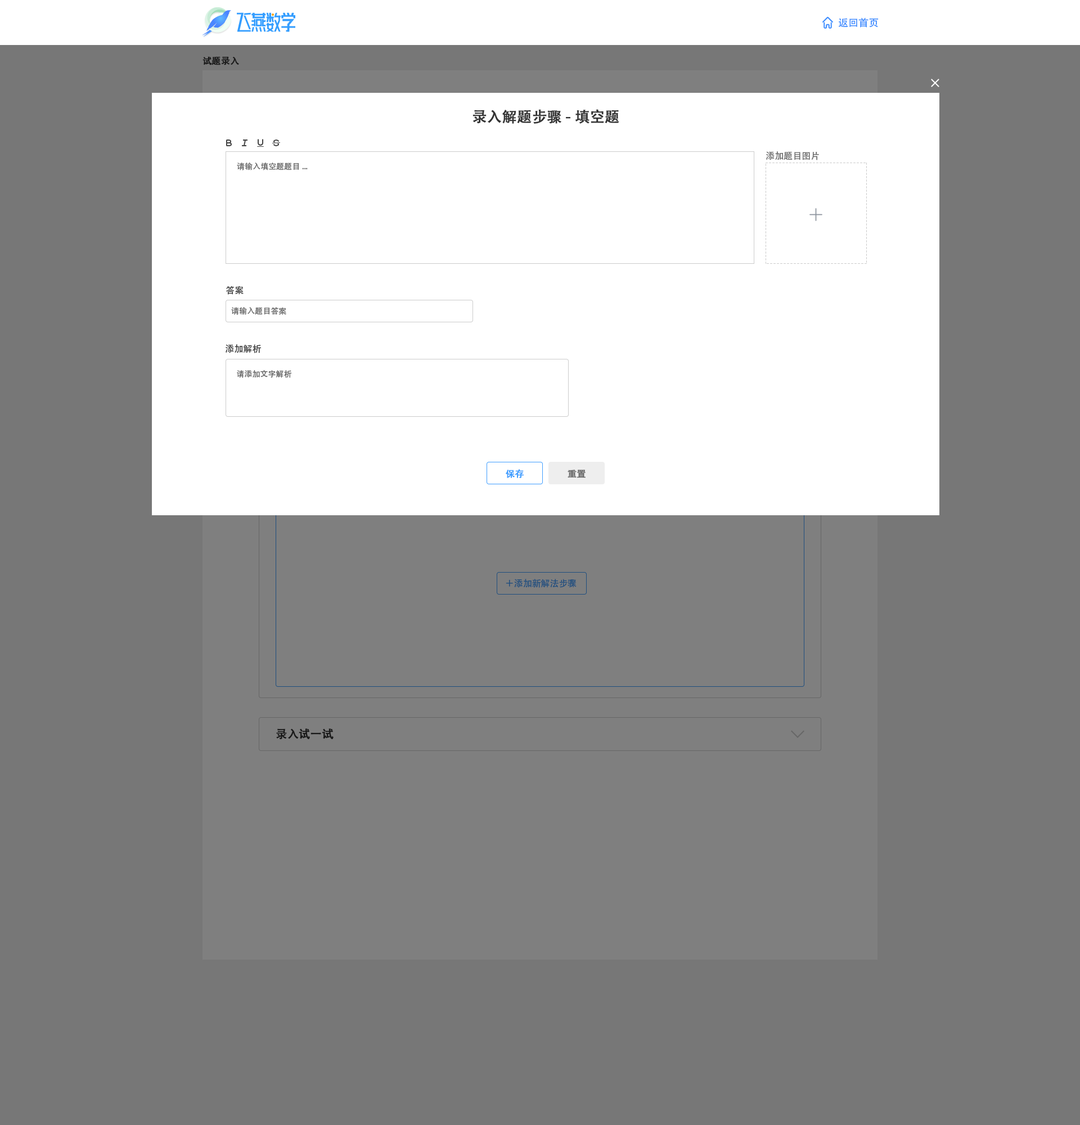
<style>
.page{position:relative;width:1080px;height:1125px;background:#777777}
.page>*{position:absolute;margin:0}
.t1{font:10.1px "AdobeHeitiStd-Regular";color:#408eff}
.t2{font:9px "AdobeHeitiStd-Regular";color:#191919;font-weight:bold}
.t3{font:14.6px "AdobeHeitiStd-Regular";color:#333333;font-weight:bold}
.t4{font:9px "AdobeHeitiStd-Regular";color:#666666}
.t5{font:7.9px "AdobeHeitiStd-Regular";color:#666666}
.t6{font:9px "AdobeHeitiStd-Regular";color:#333333}
.t7{font:9px "AdobeHeitiStd-Regular";color:#409eff;font-weight:bold}
.t8{font:9px "AdobeHeitiStd-Regular";color:#666666;font-weight:bold}
.t9{font:9px "AdobeHeitiStd-Regular";color:#204f7f}
.t10{font:11.2px "AdobeHeitiStd-Regular";color:#191919;font-weight:bold}
</style>
<div class="page">
<p class="t1" style="left:838px;top:17px;width:41px;height:11px">返回首页</p>
<p class="t2" style="left:202px;top:56px;width:37px;height:9px">试题录入</p>
<p class="t3" style="left:472px;top:109px;width:147px;height:15px">录入解题步骤-填空题</p>
<p class="t4" style="left:766px;top:151px;width:53px;height:9px">添加题目图片</p>
<p class="t5" style="left:237px;top:163px;width:71px;height:7px">请输入填空题题目...</p>
<p class="t6" style="left:226px;top:286px;width:18px;height:9px">答案</p>
<p class="t5" style="left:231px;top:307px;width:55px;height:8px">请输入题目答案</p>
<p class="t6" style="left:226px;top:344px;width:35px;height:9px">添加解析</p>
<p class="t5" style="left:237px;top:370px;width:55px;height:8px">请添加文字解析</p>
<p class="t7" style="left:506px;top:469px;width:18px;height:9px">保存</p>
<p class="t8" style="left:568px;top:470px;width:18px;height:8px">重置</p>
<p class="t9" style="left:506px;top:579px;width:71px;height:9px">＋添加新解法步骤</p>
<p class="t10" style="left:276px;top:728px;width:58px;height:12px">录入试一试</p>
</div>
